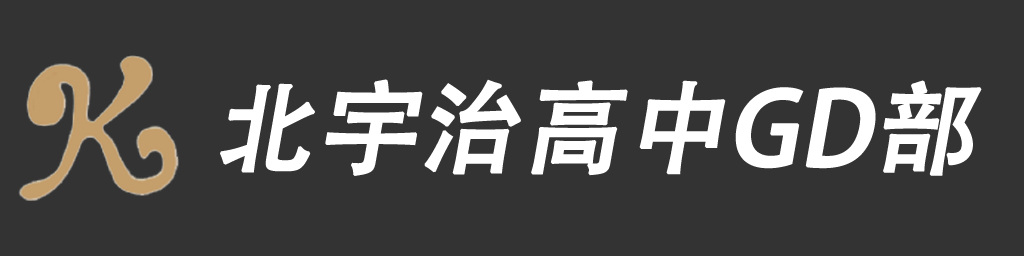
<style>
.page{position:relative;width:1024px;height:256px;background:#333333}
.page>*{position:absolute;margin:0}
.t1{font:100px "AdobeHeitiStd-Regular";color:#ffffff;font-weight:bold;font-style:italic}
</style>
<div class="page">
<p class="t1" style="left:220px;top:79px;width:762px;height:97px">北宇治高中GD部</p>
</div>
